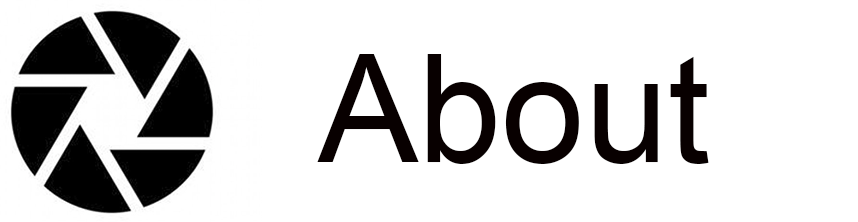
<style>
.page{position:relative;width:858px;height:222px;background:#ffffff}
.page>*{position:absolute;margin:0}
.t1{font:150px "ArialMT";color:#080000}
</style>
<div class="page">
<p class="t1" style="left:317px;top:54px;width:392px;height:110px">About</p>
</div>
